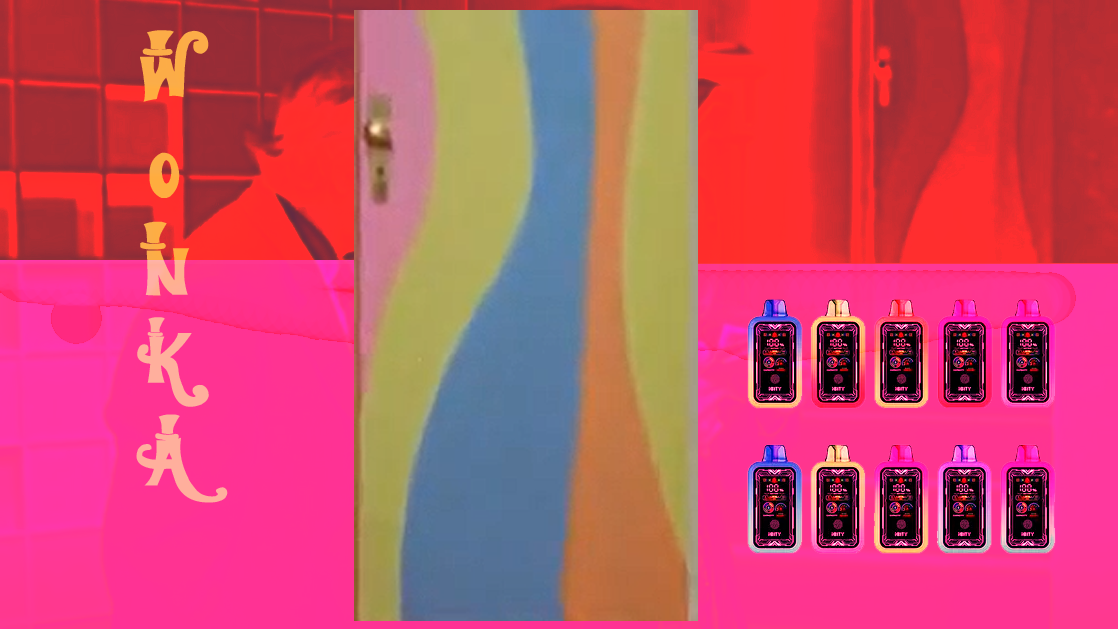
<style>
.page{position:relative;width:1118px;height:629px}
.page>*{position:absolute;margin:0}
.t1{font:80px "WillyWonka"}
</style>
<div class="page">
<p class="t1" style="left:136px;top:30px;width:92px;height:473px;text-align:center">W<br>O<br>N<br>K<br>A</p>
</div>
